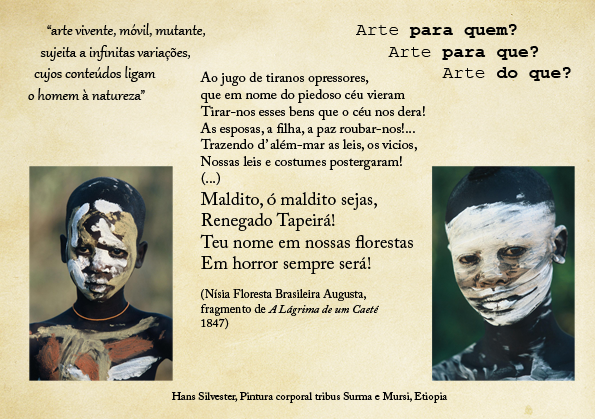
<style>
.page{position:relative;width:595px;height:419px}
.page>*{position:absolute;margin:0}
.t1{font:18px "Gabriola";color:#000000}
.t2{font:18px "CourierNewPS-BoldMT";color:#000000}
.t3{font:18px "CourierNewPSMT";color:#000000}
.t4{font:14px "ACaslonPro-Regular";color:#000000}
.t5{font:18px "ACaslonPro-Regular";color:#000000}
.t6{font:12px "ACaslonPro-Regular";color:#000000}
.t7{font:12px "ACaslonPro-Italic";color:#000000}
.t8{font:11px "ACaslonPro-Regular";color:#000000}
</style>
<div class="page">
<p class="t1" style="left:28px;top:23px;width:177px;height:77px">“arte vivente, móvil, mutante, <br>    sujeita a infinitas variações, <br>  cujos conteúdos ligam <br>o homem à natureza”</p>
<p class="t2" style="left:356px;top:24px;width:215px;height:57px;text-align:right"><span class="t3">Arte</span> para quem?     <br><span class="t3">Arte</span> para que?  <span class="t3"> <br>Arte</span> do que?</p>
<p class="t4" style="left:200px;top:71px;width:225px;height:259px">Ao jugo de tiranos opressores,<br>que em nome do piedoso céu vieram<br>Tirar-nos esses bens que o céu nos dera!<br>As esposas, a filha, a paz roubar-nos!...<br>Trazendo d’ além-mar as leis, os vicios,<br>Nossas leis e costumes postergaram!<br>(...)<br><span class="t5">Maldito, ó maldito sejas,<br>Renegado Tapeirá!<br>Teu nome em nossas florestas<br>Em horror sempre será!<br></span><span class="t6"><br>(Nísia Floresta Brasileira Augusta, <br>fragmento de </span><span class="t7">A Lágrima de um Caeté<br></span><span class="t6">1847)</span></p>
<p class="t8" style="left:172px;top:392px;width:276px;height:11px">Hans Silvester, Pintura corporal tribus Surma e Mursi, Etiopia</p>
</div>
